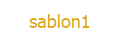
<style>
.page{position:relative;width:120px;height:40px;background:#ffffff}
.page>*{position:absolute;margin:0}
.t1{font:18px "Tahoma";color:#ddaa22}
</style>
<div class="page">
<p class="t1" style="left:29px;top:14px;width:61px;height:14px">sablon1</p>
</div>
